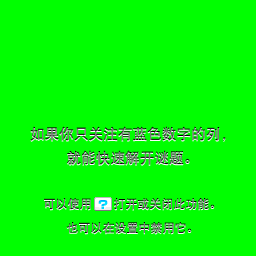
<style>
.page{position:relative;width:256px;height:256px;background:#00ff00}
.page>*{position:absolute;margin:0}
.t1{font:14.7px/24px "DFPHeiW5-GB"}
.t2{font:12px/24px "DFPHeiW5-GB"}
.t3{font:12px/24px "DFPHeiW5-GB";letter-spacing:1.82em}
</style>
<div class="page">
<p class="t1" style="left:30px;top:126px;width:196px;height:39px;text-align:center">如果你只关注有蓝色数字的列，<br>就能快速解开谜题。</p>
<p class="t2" style="left:44px;top:198px;width:171px;height:36px;text-align:center">可以使<span class="t3">用</span>打开或关闭此功能。<br>也可以在设置中禁用它。</p>
</div>
